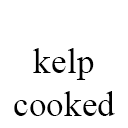
<style>
.page{position:relative;width:128px;height:128px;background:#ffffff}
.page>*{position:absolute;margin:0}
.t1{font:35.4px "TimesNewRomanPSMT";color:#000000}
</style>
<div class="page">
<p class="t1" style="left:14px;top:48px;width:101px;height:68px;text-align:center">kelp<br>cooked</p>
</div>
